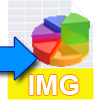
<style>
.page{position:relative;width:100px;height:100px}
.page>*{position:absolute;margin:0}
.t1{font:28px "Arial-BoldMT";color:#fefefd}
</style>
<div class="page">
<p class="t1" style="left:29px;top:75px;width:50px;height:20px">IMG</p>
</div>
